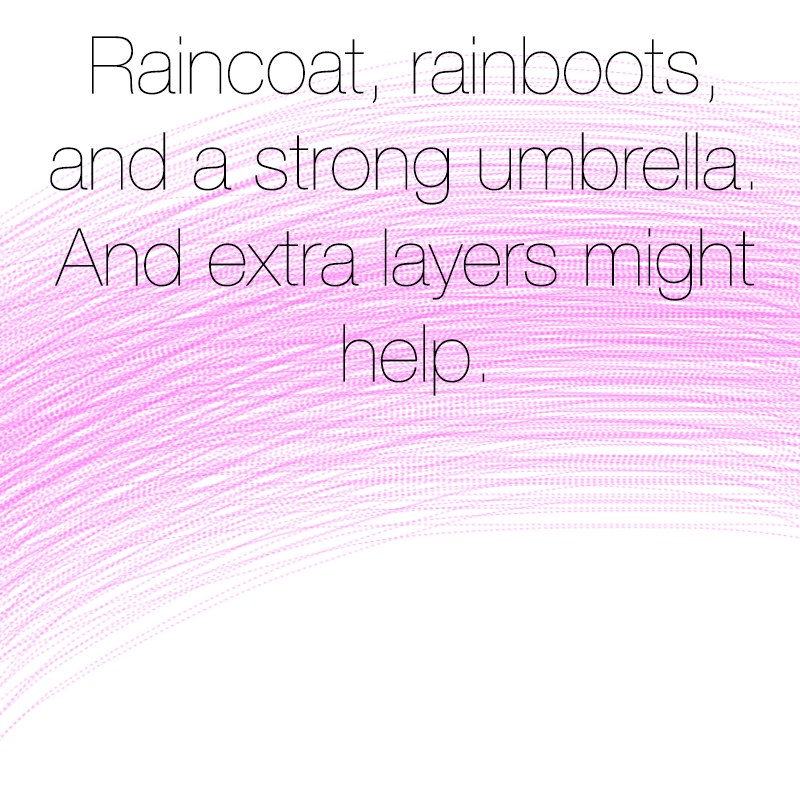
<style>
.page{position:relative;width:800px;height:800px;background:#ffffff}
.page>*{position:absolute;margin:0}
.t1{font:80px "HelveticaNeue-UltraLight";color:#000000}
</style>
<div class="page">
<p class="t1" style="left:50px;top:36px;width:705px;height:360px;text-align:center">Raincoat, rainboots, <br>and a strong umbrella. <br>And extra layers might <br>help.</p>
</div>
